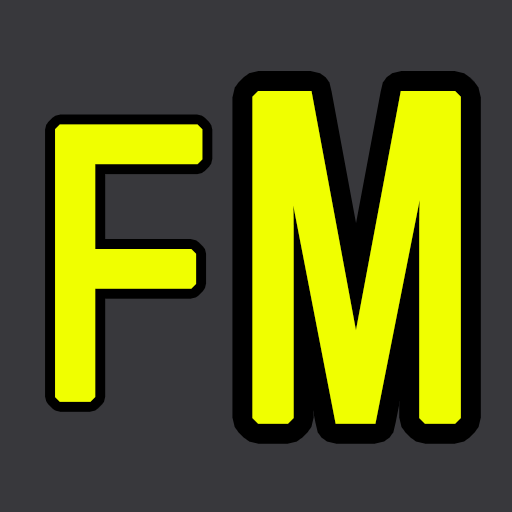
<style>
.page{position:relative;width:512px;height:512px;background:#38383c}
.page>*{position:absolute;margin:0}
.t1{font:450px "NotoMono";color:#f0ff00;font-weight:bold;scale:0.89 1}
.t2{font:375px "NotoMono";color:#f0ff00;font-weight:bold;scale:0.89 1}
</style>
<div class="page">
<p class="t1" style="left:252px;top:91px;width:209px;height:333px">M</p>
<p class="t2" style="left:55px;top:124px;width:148px;height:278px">F</p>
</div>
